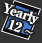
<style>
.page{position:relative;width:42px;height:43px;background:#333333}
.page>*{position:absolute;margin:0}
.t1{font:13px/14px "RyuminPro-ExBold";letter-spacing:-0.08em;color:#ffffff;font-weight:bold}
.t2{font:13px/14px "RyuminPro-ExBold";color:#ffffff;font-weight:bold}
.t3{font:13px/14px "TimesNewRomanPSMT";color:#ffffff;font-weight:bold}
</style>
<div class="page">
<p class="t1" style="left:3px;top:2px;width:36px;height:32px;text-align:center;rotate:19deg">Yearly<br><span class="t2">  12 </span><span class="t3">~</span></p>
</div>
